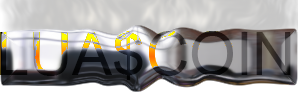
<style>
.page{position:relative;width:298px;height:94px}
.page>*{position:absolute;margin:0}
.t1{font:60px "ArialMT"}
</style>
<div class="page">
<p class="t1" style="left:0px;top:31px;width:291px;height:49px">LUA$COIN</p>
</div>
